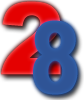
<style>
.page{position:relative;width:84px;height:100px}
.page>*{position:absolute;margin:0}
.t1{font:100px "Arial-Black"}
.t2{font:100px "Arial-Black";color:#2f5496;scale:0.77 1}
</style>
<div class="page">
<p class="t1" style="left:1px;top:1px;width:60px;height:74px">2</p>
<p class="t2" style="left:33px;top:20px;width:45px;height:75px">8</p>
</div>
